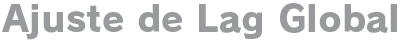
<style>
.page{position:relative;width:400px;height:40px;background:#ffffff}
.page>*{position:absolute;margin:0}
.t1{font:36px "RodinPro-EB";letter-spacing:0.003em;color:#989a9d}
</style>
<div class="page">
<p class="t1" style="left:2px;top:3px;width:395px;height:37px">Ajuste de Lag Global</p>
</div>
